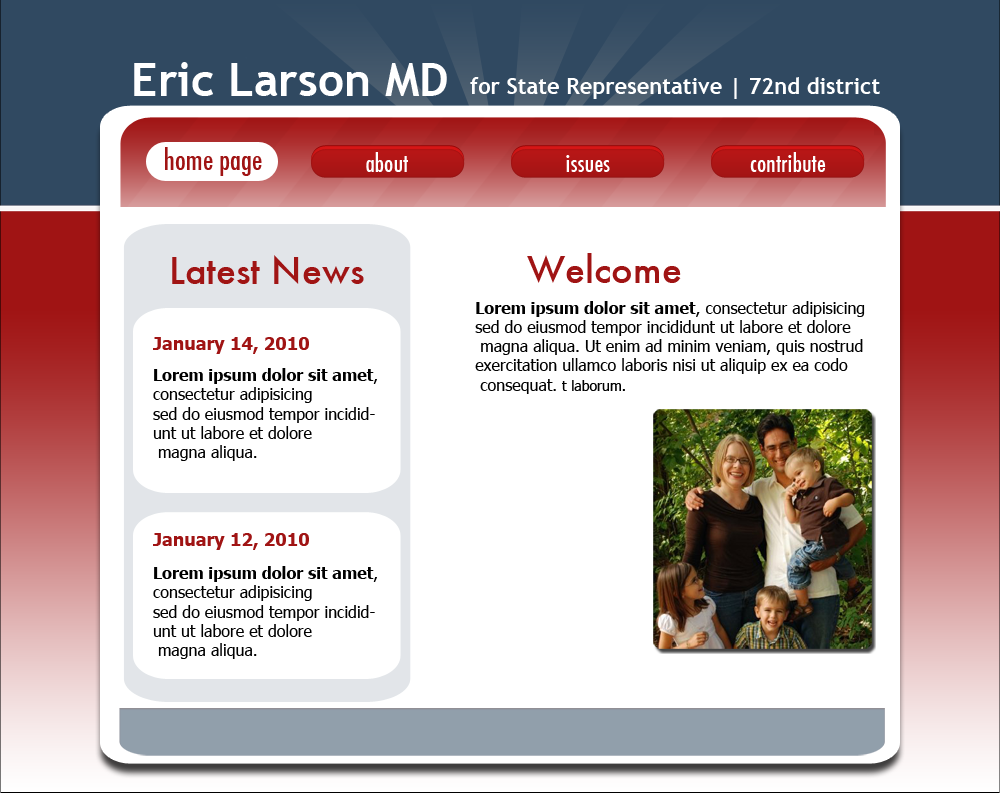
<style>
.page{position:relative;width:1000px;height:800px;background:#ffffff}
.page>*{position:absolute;margin:0}
.t1{font:46px "TrebuchetMS-Bold";color:#ffffff}
.t2{font:22px "TrebuchetMS-Bold";color:#ffffff}
.t3{font:28px "Futura-CondensedMedium";color:#a01414}
.t4{font:24px "Futura-CondensedMedium";color:#ffffff}
.t5{font:36px "Futura-Medium";color:#a01414}
.t6{font:16px "Tahoma";color:#000000}
.t7{font:16px "Tahoma-Bold";color:#000000}
.t8{font:14px "Tahoma";color:#000000}
.t9{font:18px "Tahoma-Bold";color:#a01414}
</style>
<div class="page">
<p class="t1" style="left:134px;top:62px;width:313px;height:34px">Eric Larson MD</p>
<p class="t2" style="left:470px;top:77px;width:410px;height:22px">for State Representative | 72nd district</p>
<p class="t3" style="left:165px;top:147px;width:97px;height:29px">home page</p>
<p class="t4" style="left:366px;top:152px;width:42px;height:20px">about</p>
<p class="t4" style="left:566px;top:155px;width:44px;height:17px">issues</p>
<p class="t4" style="left:750px;top:152px;width:76px;height:20px">contribute</p>
<p class="t5" style="left:172px;top:255px;width:192px;height:29px">Latest News</p>
<p class="t5" style="left:527px;top:253px;width:154px;height:30px">Welcome</p>
<p class="t6" style="left:475px;top:301px;width:390px;height:93px"><span class="t7">Lorem ipsum dolor sit amet</span>, consectetur adipisicing<br>sed do eiusmod tempor incididunt ut labore et dolore<br> magna aliqua. Ut enim ad minim veniam, quis nostrud <br>exercitation ullamco laboris nisi ut aliquip ex ea codo<br> consequat. <span class="t8">t laborum.</span></p>
<p class="t9" style="left:153px;top:337px;width:156px;height:17px">January 14, 2010</p>
<p class="t6" style="left:153px;top:368px;width:224px;height:93px"><span class="t7">Lorem ipsum dolor sit amet</span>, consectetur adipisicing<br>sed do eiusmod tempor incididunt ut labore et dolore<br> magna aliqua.</p>
<p class="t9" style="left:153px;top:533px;width:156px;height:17px">January 12, 2010</p>
<p class="t6" style="left:153px;top:566px;width:224px;height:93px"><span class="t7">Lorem ipsum dolor sit amet</span>, consectetur adipisicing<br>sed do eiusmod tempor incididunt ut labore et dolore<br> magna aliqua.</p>
</div>
